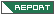
<style>
.page{position:relative;width:55px;height:15px;background:#227751}
.page>*{position:absolute;margin:0}
.t1{font:8px "BitDustTwo";color:#ffffff}
</style>
<div class="page">
<p class="t1" style="left:15px;top:5px;width:35px;height:5px">REPORT</p>
</div>
